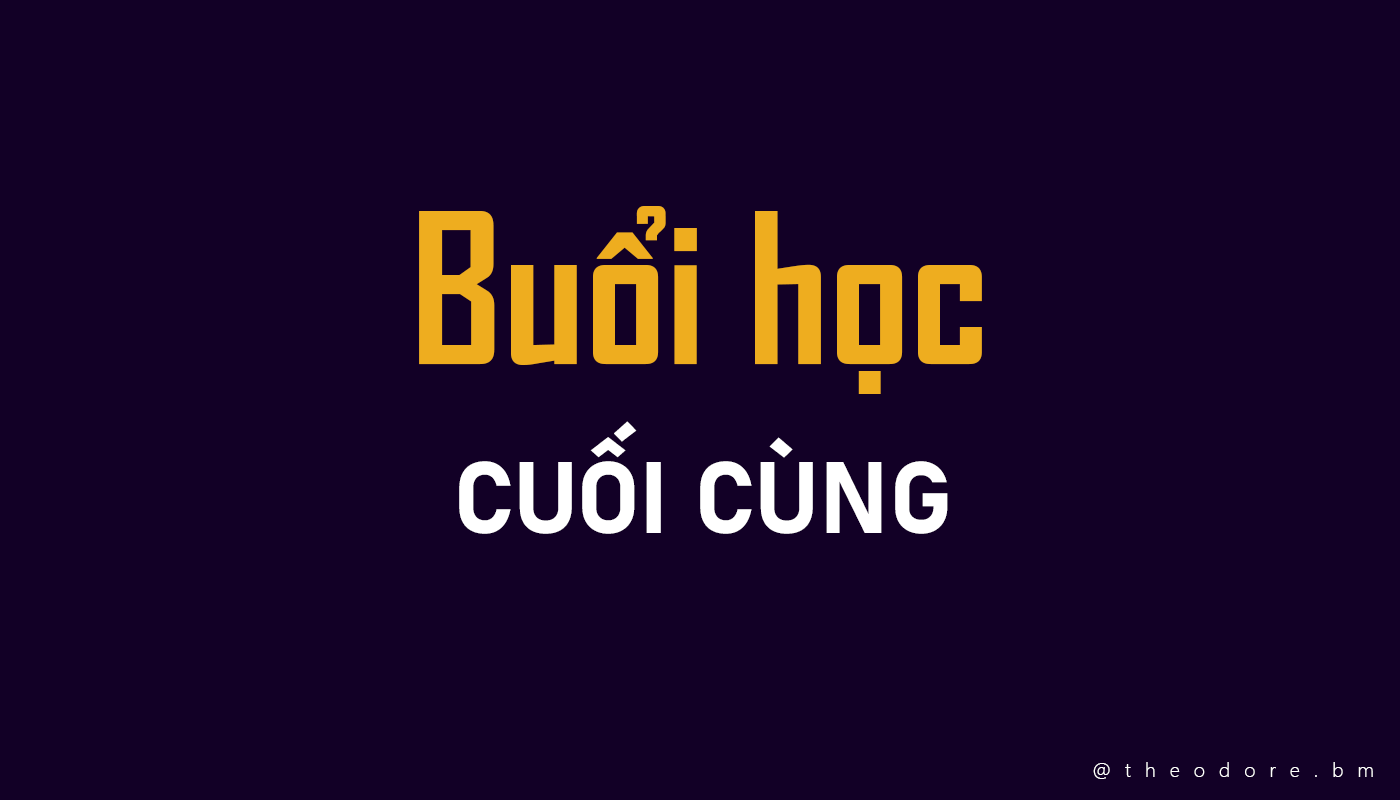
<style>
.page{position:relative;width:1400px;height:800px;background:#120026}
.page>*{position:absolute;margin:0}
.t1{font:200px "SVN-AgencyFBbold";color:#eead1f}
.t2{font:100px "Bahnschrift-Bold";color:#ffffff}
.t3{font:20px "SegoeUI-Light";letter-spacing:0.7em;color:#ffffff}
</style>
<div class="page">
<p class="t1" style="left:419px;top:206px;width:563px;height:188px">Buổi học</p>
<p class="t2" style="left:459px;top:421px;width:489px;height:113px">CUỐI CÙNG</p>
<p class="t3" style="left:1093px;top:762px;width:280px;height:17px">@theodore.bm</p>
</div>
